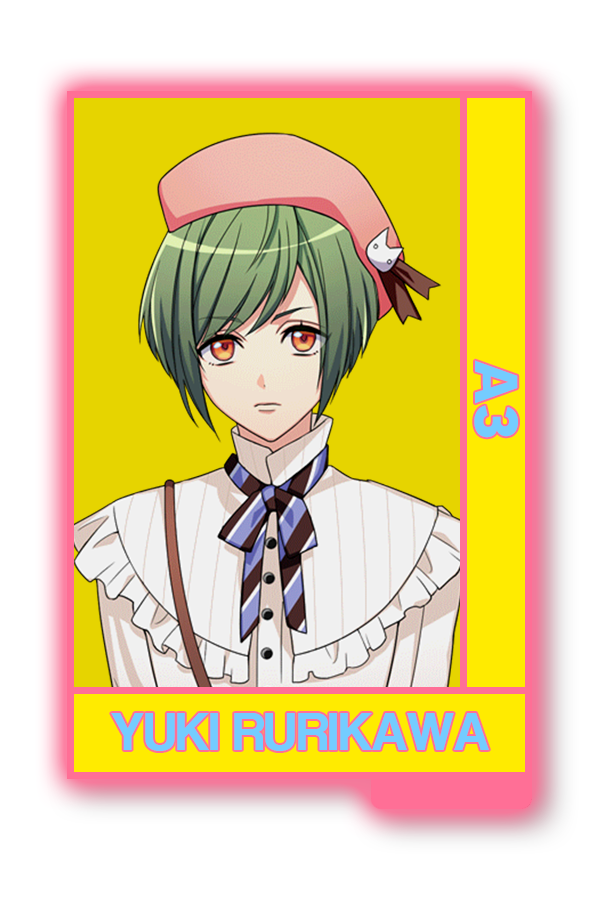
<style>
.page{position:relative;width:600px;height:900px;background:#ffffff}
.page>*{position:absolute;margin:0}
.t1{font:60.5px "MADETOMMY-Bold";color:#74ccff}
.t2{font:54.9px "CoolveticaRg-Regular";color:#74ccff}
</style>
<div class="page">
<p class="t1" style="left:474px;top:360px;width:44px;height:78px;rotate:90deg">A3</p>
<p class="t2" style="left:111px;top:713px;width:378px;height:38px">YUKI RURIKAWA</p>
</div>
